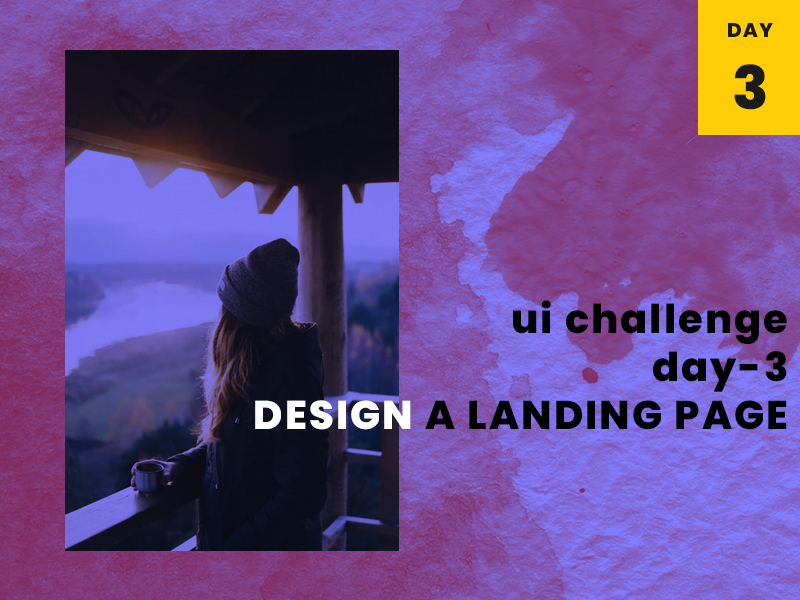
<style>
.page{position:relative;width:800px;height:600px}
.page>*{position:absolute;margin:0}
.t1{font:20px "Poppins-ExtraBold";letter-spacing:0.05em;color:#1b1b1b}
.t2{font:60px "Poppins-ExtraBold";letter-spacing:0.05em;color:#1b1b1b}
.t3{font:40px "Poppins-ExtraBold";letter-spacing:0.05em;color:#000000}
.t4{font:40px "Poppins-ExtraBold";letter-spacing:0.05em;color:#ffffff}
</style>
<div class="page">
<p class="t1" style="left:728px;top:23px;width:45px;height:87px;text-align:center">DAY<br><span class="t2">3</span></p>
<p class="t3" style="left:255px;top:300px;width:532px;height:130px;text-align:right">ui challenge<br>day-3<br><span class="t4">DESIGN</span> A LANDING PAGE</p>
</div>
